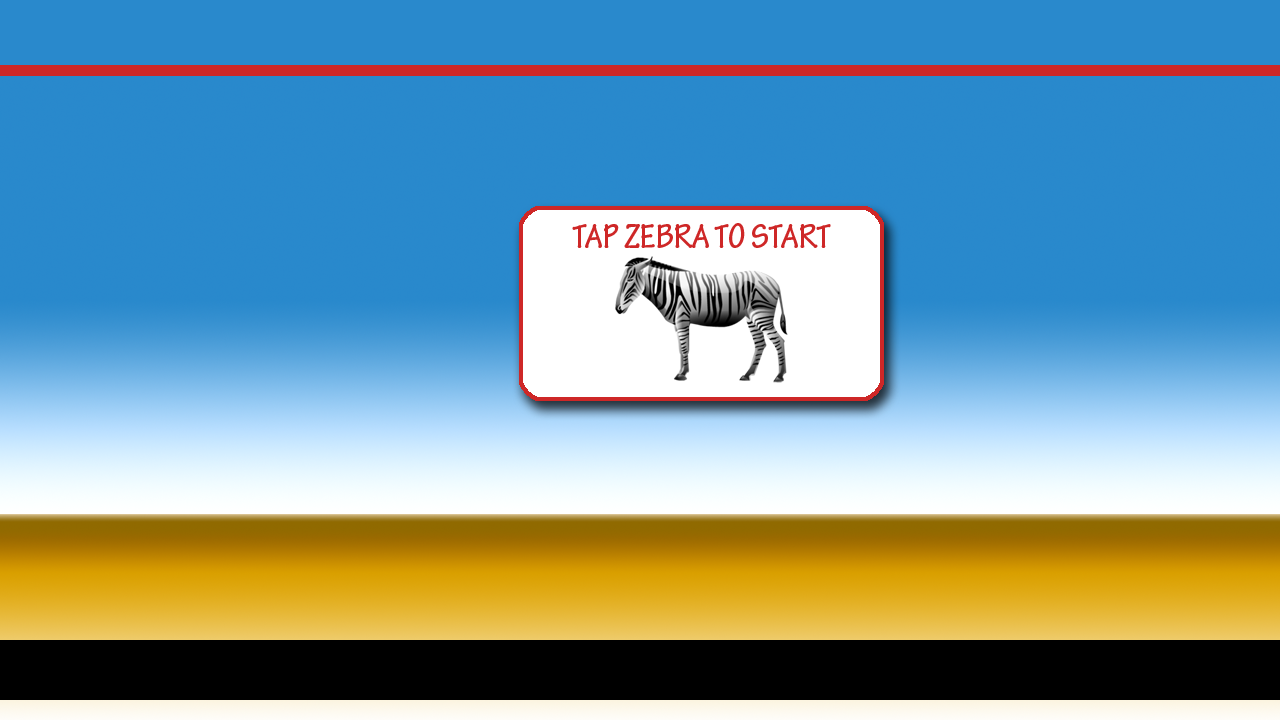
<style>
.page{position:relative;width:1280px;height:720px;background:#2989cc}
.page>*{position:absolute;margin:0}
.t1{font:36px "TektonPro-BoldCond";color:#ce2727}
</style>
<div class="page">
<p class="t1" style="left:572px;top:223px;width:259px;height:25px">TAP ZEBRA TO START</p>
</div>
